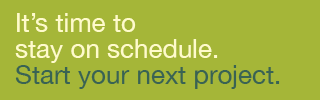
<style>
.page{position:relative;width:320px;height:100px;background:#a5b638}
.page>*{position:absolute;margin:0}
.t1{font:26px/26px "HelveticaNeue";color:#fffbcb}
.t2{font:26px/26px "HelveticaNeue";color:#396353}
</style>
<div class="page">
<p class="t1" style="left:15px;top:13px;width:265px;height:76px">It’s time to <br>stay on schedule.<br><span class="t2">Start your next project.</span></p>
</div>
